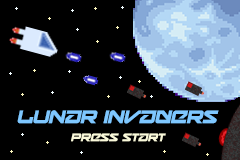
<style>
.page{position:relative;width:240px;height:160px;background:#000000}
.page>*{position:absolute;margin:0}
.t1{font:18px "Onky-Italic";color:#7ec7ff}
.t2{font:11px "Onky-Italic";color:#faf9da}
</style>
<div class="page">
<p class="t1" style="left:17px;top:110px;width:202px;height:14px">Lunar InvaDers</p>
<p class="t2" style="left:71px;top:133px;width:95px;height:9px">Press Start</p>
</div>
